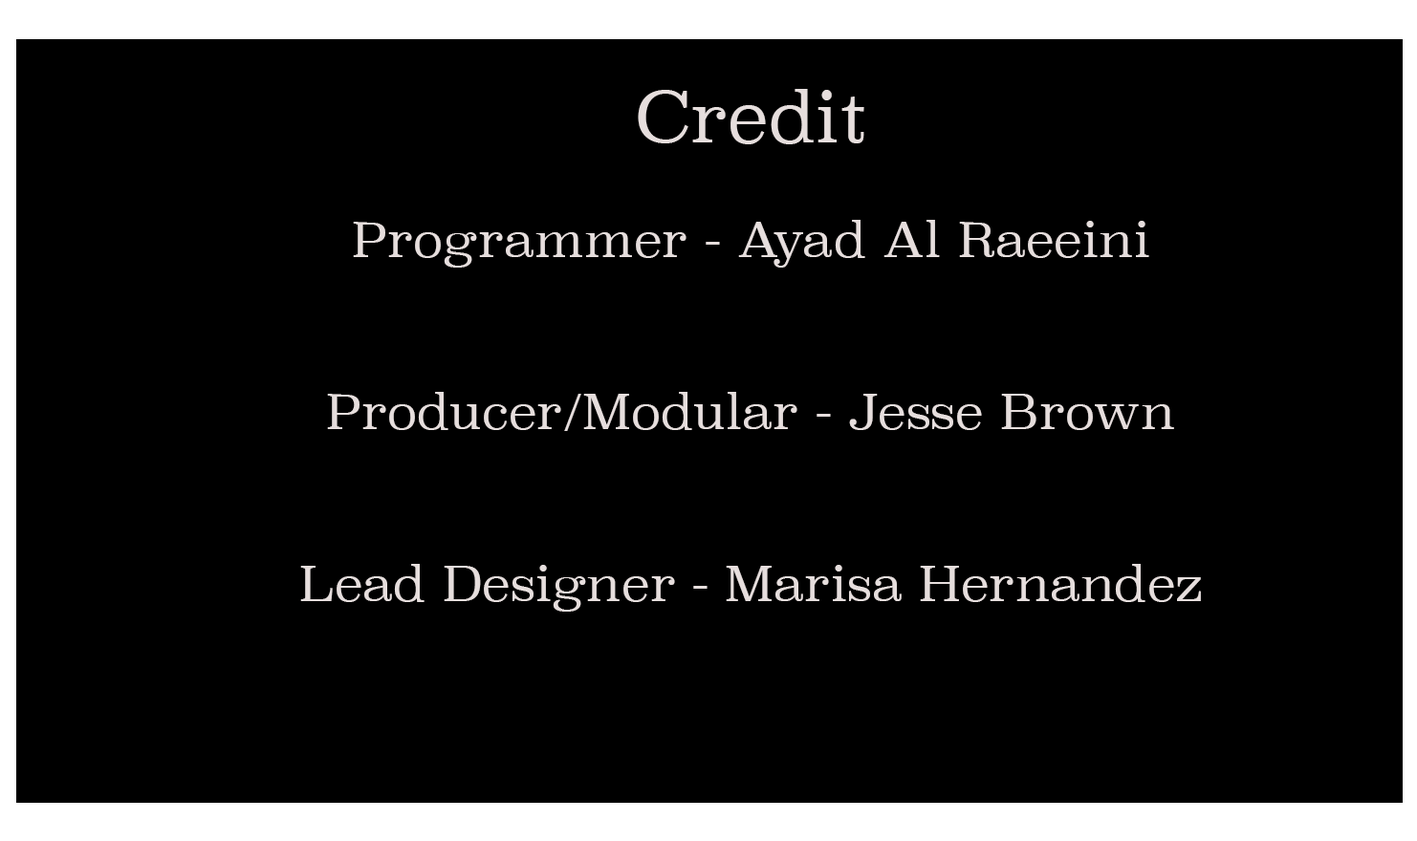
<style>
.page{position:relative;width:1417px;height:841px;background:#000000}
.page>*{position:absolute;margin:0}
.t1{font:47.8px "Superclarendon-Light";color:#e6dedd}
.t2{font:47.8px "Superclarendon-Light";color:#d5bbb6}
.t3{font:68.8px "Superclarendon-Light";color:#e6dedd}
</style>
<div class="page">
<p class="t1" style="left:300px;top:89px;width:901px;height:523px;text-align:center"><span class="t2"><br></span><span class="t3">Credit<br></span><br>Programmer - Ayad Al Raeeini<br><br><br>Producer/Modular - Jesse Brown<br><br><br>Lead Designer - Marisa Hernandez</p>
</div>
